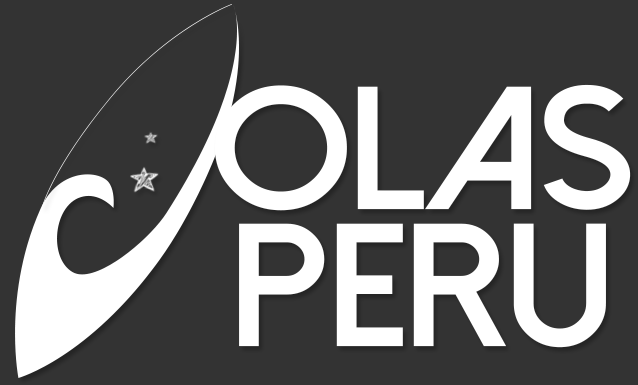
<style>
.page{position:relative;width:638px;height:385px;background:#333333}
.page>*{position:absolute;margin:0}
.t1{font:174.9px/136.9px "DolceVitaHeavy-Bold";letter-spacing:-0.02em;color:#fffefe;text-transform:uppercase;scale:1.06 1}
</style>
<div class="page">
<p class="t1" style="left:214px;top:84px;width:417px;height:264px;text-align:center">olas<br>peru</p>
</div>
